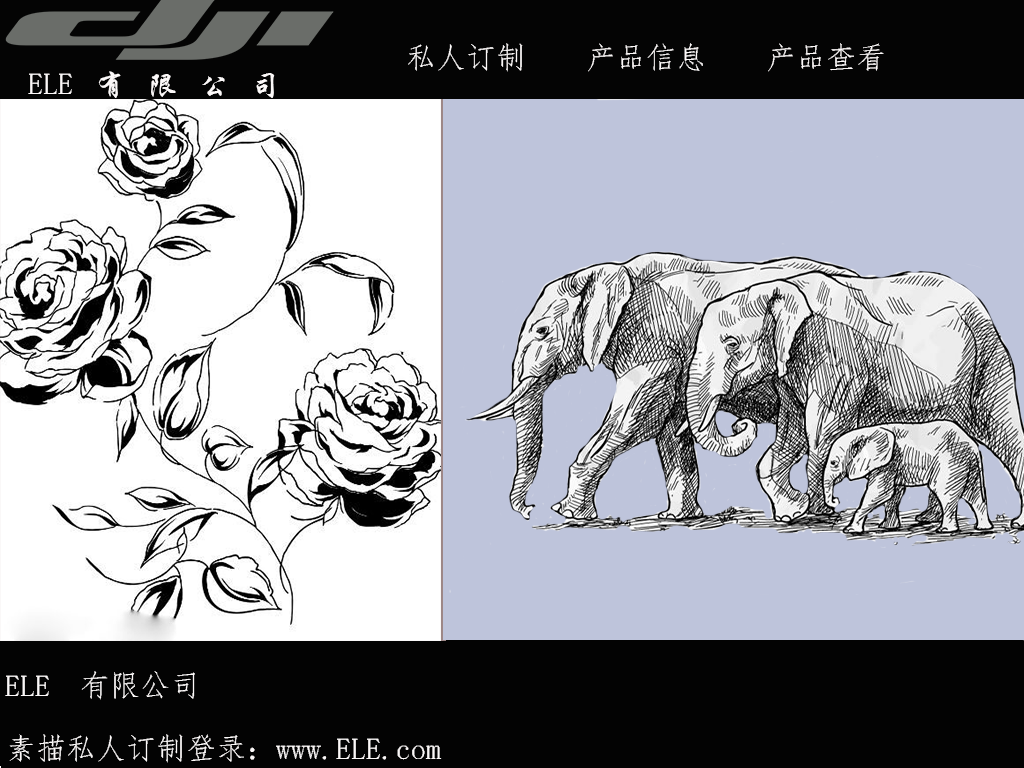
<style>
.page{position:relative;width:1024px;height:768px;background:#bec4db}
.page>*{position:absolute;margin:0}
.t1{font:30px "·ÂËÎ";color:#fcf9f9}
.t2{font:30px "STXingkai";color:#fcf9f9}
</style>
<div class="page">
<p class="t1" style="left:408px;top:43px;width:476px;height:29px">私人订制    产品信息    产品查看</p>
<p class="t2" style="left:28px;top:71px;width:247px;height:27px"><span class="t1">ELE</span>   有   限   公   司</p>
<p class="t1" style="left:5px;top:671px;width:190px;height:29px">ELE  有限公司</p>
<p class="t1" style="left:9px;top:734px;width:433px;height:29px">素描私人订制登录：www.ELE.com</p>
</div>
